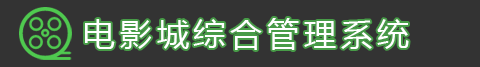
<style>
.page{position:relative;width:480px;height:67px;background:#333333}
.page>*{position:absolute;margin:0}
.t1{font:32px "MicrosoftYaHei";letter-spacing:0.15em;color:#ffffff}
</style>
<div class="page">
<p class="t1" style="left:85px;top:18px;width:324px;height:32px">电影城综合管理系统</p>
</div>
